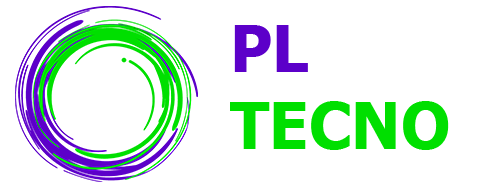
<style>
.page{position:relative;width:485px;height:185px;background:#ffffff}
.page>*{position:absolute;margin:0}
.t1{font:64px/77.3px "Tahoma-Bold";color:#00df00}
.t2{font:64px/77.3px "Tahoma-Bold";color:#5c00c9}
</style>
<div class="page">
<p class="t1" style="left:230px;top:25px;width:219px;height:125px"><span class="t2">PL<br></span>TECNO</p>
</div>
